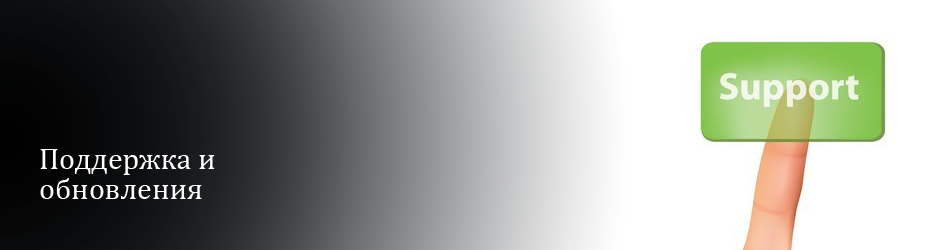
<style>
.page{position:relative;width:950px;height:250px;background:#ffffff}
.page>*{position:absolute;margin:0}
.t1{font:30px/30px "Cambria";color:#ffffff}
</style>
<div class="page">
<p class="t1" style="left:40px;top:149px;width:175px;height:50px">Поддержка и <br>обновления</p>
</div>
